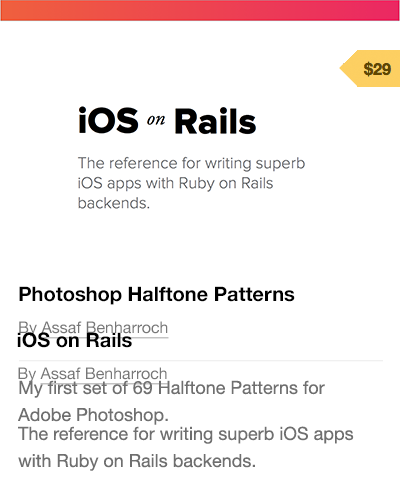
<style>
.page{position:relative;width:400px;height:486px;background:#ffffff}
.page>*{position:absolute;margin:0}
.t1{font:20.1px "HelveticaNeue-Bold";color:#000000}
.t2{font:16.1px "HelveticaNeue";color:#777777;text-decoration:underline}
.t3{font:16.1px "HelveticaNeue";color:#777777}
.t4{font:18.1px/27.1px "HelveticaNeue";color:#6f6f6f}
</style>
<div class="page">
<p class="t1" style="left:19px;top:286px;width:276px;height:19px">Photoshop Halftone Patterns</p>
<p class="t2" style="left:19px;top:321px;width:150px;height:18px"><span class="t3">By </span>Assaf Benharroch</p>
<p class="t1" style="left:17px;top:332px;width:115px;height:16px">iOS on Rails</p>
<p class="t2" style="left:18px;top:367px;width:150px;height:18px"><span class="t3">By </span>Assaf Benharroch</p>
<p class="t4" style="left:18px;top:380px;width:307px;height:45px">My first set of 69 Halftone Patterns for <br>Adobe Photoshop.</p>
<p class="t4" style="left:18px;top:426px;width:336px;height:45px">The reference for writing superb iOS apps <br>with Ruby on Rails backends.</p>
</div>
